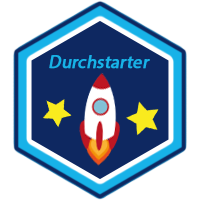
<style>
.page{position:relative;width:200px;height:200px;background:#ffffff}
.page>*{position:absolute;margin:0}
.t1{font:18px "MyriadPro-Regular";letter-spacing:-0.005em;color:#17b2e8;font-weight:bold;font-style:italic}
</style>
<div class="page">
<p class="t1" style="left:49px;top:55px;width:101px;height:14px">Durchstarter</p>
</div>
